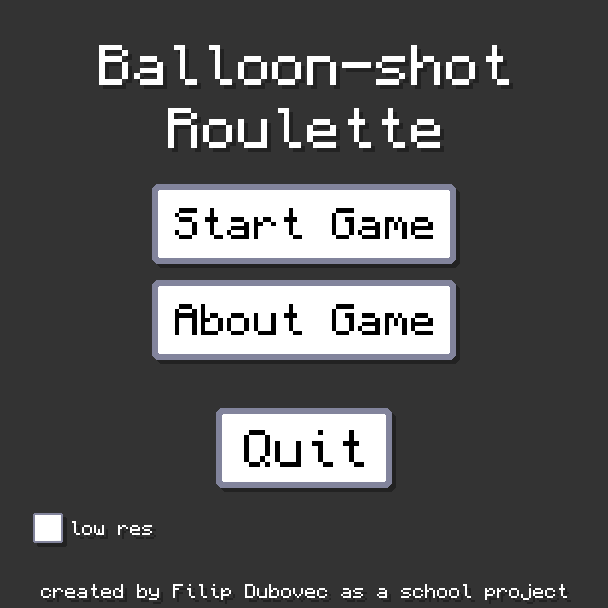
<style>
.page{position:relative;width:608px;height:608px;background:#333333}
.page>*{position:absolute;margin:0}
.t1{font:52px "Monocraft";color:#ffffff}
.t2{font:39.3px "Monocraft";color:#000000}
.t3{font:47.3px "Monocraft";color:#000000}
.t4{font:18px "Monocraft";color:#ffffff}
</style>
<div class="page">
<p class="t1" style="left:99px;top:45px;width:410px;height:103px;text-align:center">Balloon-shot<br>Roulette</p>
<p class="t2" style="left:175px;top:208px;width:258px;height:31px">Start Game</p>
<p class="t2" style="left:175px;top:304px;width:258px;height:31px">About Game</p>
<p class="t3" style="left:244px;top:430px;width:120px;height:37px">Quit</p>
<p class="t4" style="left:72px;top:521px;width:80px;height:14px">low res</p>
<p class="t4" style="left:41px;top:584px;width:526px;height:16px">created by Filip Dubovec as a school project</p>
</div>
